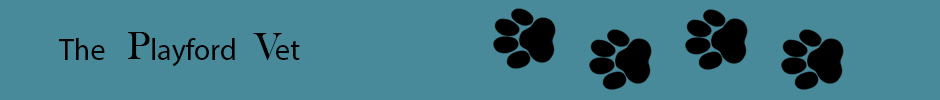
<style>
.page{position:relative;width:940px;height:100px;background:#488a99}
.page>*{position:absolute;margin:0}
.t1{font:30px "MyriadPro-Regular";color:#000000}
.t2{font:40px "BaskOldFace";color:#000000}
</style>
<div class="page">
<p class="t1" style="left:59px;top:38px;width:46px;height:22px">The</p>
<p class="t2" style="left:128px;top:32px;width:22px;height:27px">P</p>
<p class="t1" style="left:152px;top:38px;width:83px;height:29px">layford</p>
<p class="t2" style="left:253px;top:33px;width:29px;height:27px">V</p>
<p class="t1" style="left:276px;top:40px;width:24px;height:20px">et</p>
</div>
